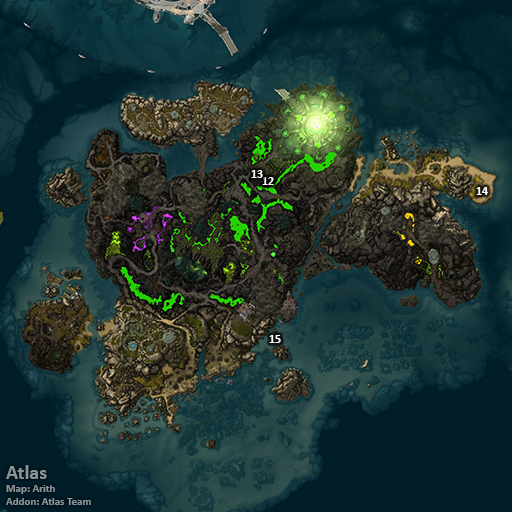
<style>
.page{position:relative;width:512px;height:512px}
.page>*{position:absolute;margin:0}
.t1{font:12px "Calibri-Bold";color:#ffffff}
.t2{font:11px "Calibri-Bold";color:#8d9396}
.t3{font:20px "Calibri-Bold";color:#8d9396}
</style>
<div class="page">
<p class="t1" style="left:251px;top:170px;width:12px;height:8px">13</p>
<p class="t1" style="left:262px;top:177px;width:12px;height:8px">12</p>
<p class="t1" style="left:476px;top:187px;width:12px;height:8px">14</p>
<p class="t1" style="left:269px;top:335px;width:12px;height:8px">15</p>
<p class="t2" style="left:6px;top:465px;width:85px;height:40px"><span class="t3">Atlas<br></span>Map: Arith<br>Addon: Atlas Team</p>
</div>
